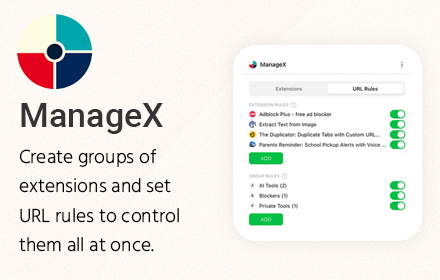
<style>
.page{position:relative;width:440px;height:280px;background:#ffffff}
.page>*{position:absolute;margin:0}
.t1{font:34px "Roboto-Medium";color:#343434}
.t2{font:19.4px/29.2px "Hind-Light";color:#000000}
</style>
<div class="page">
<p class="t1" style="left:21px;top:103px;width:142px;height:31px">ManageX</p>
<p class="t2" style="left:19px;top:149px;width:160px;height:103px">Create groups of extensions and set URL rules to control them all at once.</p>
</div>
